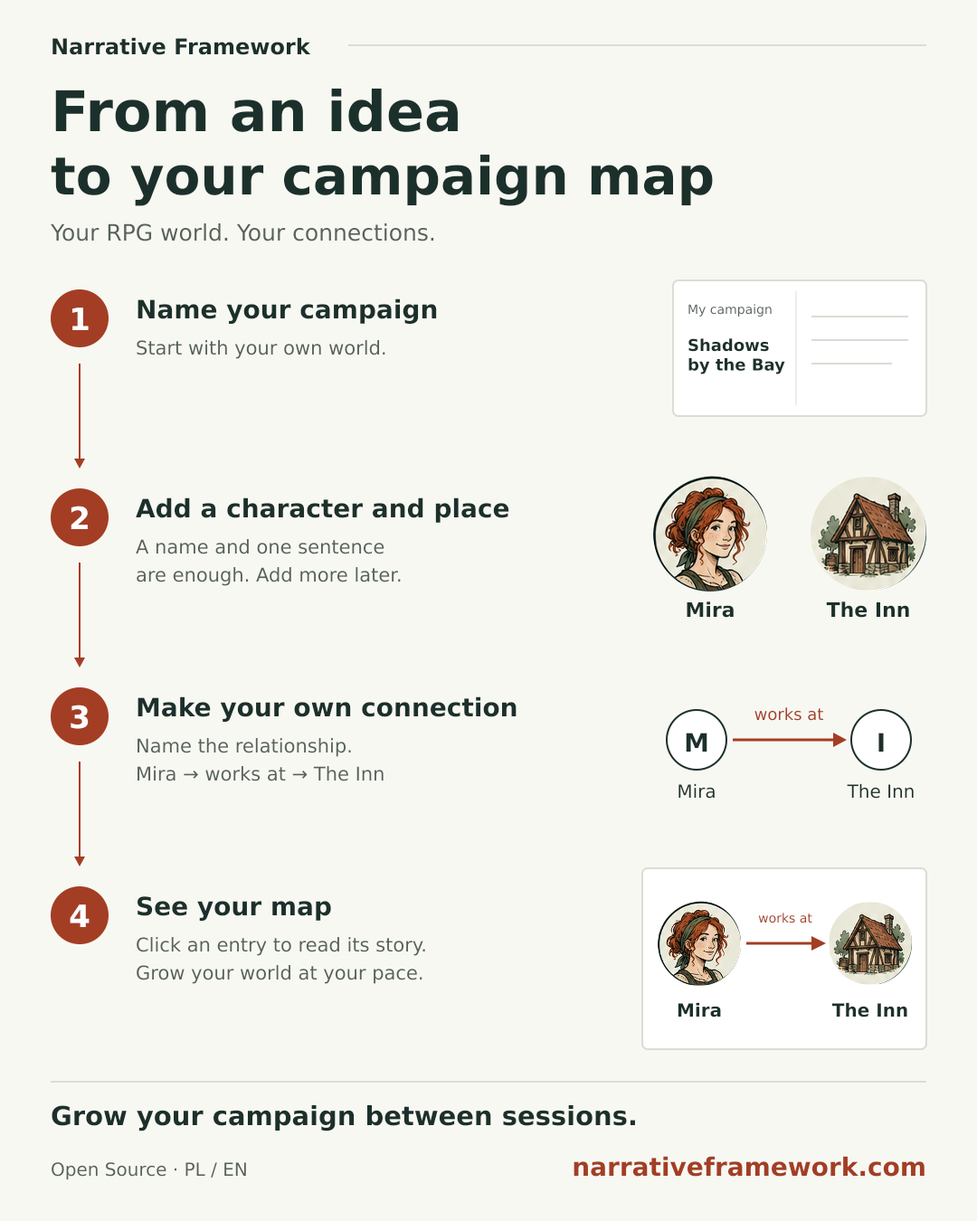
<style>
.page{position:relative;width:977px;height:1221px;background:#f8f8f3}
.page>*{position:absolute;margin:0}
.t1{font:21.7px "DejaVuSans-Bold";color:#1c302b}
.t2{font:56.1px "DejaVuSans-Bold";color:#1c302b}
.t3{font:52.5px "DejaVuSans-Bold";color:#1c302b}
.t4{font:22.6px "DejaVuSans-Regular";color:#56615a}
.t5{font:25.3px "DejaVuSans-Bold";color:#1c302b}
.t6{font:12.7px "DejaVuSans-Regular";color:#56615a}
.t7{font:30.7px "DejaVuSans-Bold";color:#ffffff}
.t8{font:19px "DejaVuSans-Regular";color:#56615a}
.t9{font:16.3px "DejaVuSans-Bold";color:#1c302b}
.t10{font:19.9px "DejaVuSans-Bold";color:#1c302b}
.t11{font:16.3px "DejaVuSans-Regular";color:#a33e24}
.t12{font:18.1px "DejaVuSans-Regular";color:#1c302b}
.t13{font:12.7px "DejaVuSans-Regular";color:#a33e24}
.t14{font:18.1px "DejaVuSans-Bold";color:#1c302b}
.t15{font:26.2px "DejaVuSans-Bold";color:#1c302b}
.t16{font:25.3px "DejaVuSans-Bold";color:#a33e24}
.t17{font:18.1px "DejaVuSans-Regular";color:#56615a}
</style>
<div class="page">
<p class="t1" style="left:52px;top:37px;width:260px;height:19px">Narrative Framework</p>
<p class="t2" style="left:54px;top:88px;width:405px;height:45px">From an idea</p>
<p class="t3" style="left:50px;top:154px;width:664px;height:53px">to your campaign map</p>
<p class="t4" style="left:49px;top:223px;width:386px;height:19px">Your RPG world. Your connections.</p>
<p class="t5" style="left:137px;top:298px;width:301px;height:28px">Name your campaign</p>
<p class="t6" style="left:687px;top:304px;width:85px;height:13px">My campaign</p>
<p class="t7" style="left:71px;top:307px;width:19px;height:24px">1</p>
<p class="t8" style="left:136px;top:340px;width:250px;height:20px">Start with your own world.</p>
<p class="t9" style="left:687px;top:338px;width:99px;height:37px">Shadows<br>by the Bay</p>
<p class="t5" style="left:135px;top:497px;width:375px;height:27px">Add a character and place</p>
<p class="t7" style="left:70px;top:506px;width:19px;height:24px">2</p>
<p class="t8" style="left:135px;top:539px;width:250px;height:16px">A name and one sentence</p>
<p class="t8" style="left:136px;top:567px;width:266px;height:20px">are enough. Add more later.</p>
<p class="t10" style="left:685px;top:601px;width:49px;height:18px">Mira</p>
<p class="t10" style="left:825px;top:601px;width:85px;height:18px">The Inn</p>
<p class="t5" style="left:137px;top:696px;width:380px;height:27px">Make your own connection</p>
<p class="t7" style="left:70px;top:704px;width:20px;height:26px">3</p>
<p class="t11" style="left:753px;top:707px;width:71px;height:15px">works at</p>
<p class="t8" style="left:137px;top:738px;width:215px;height:20px">Name the relationship.</p>
<p class="t5" style="left:685px;top:733px;width:23px;height:19px">M</p>
<p class="t5" style="left:878px;top:733px;width:6px;height:19px">I</p>
<p class="t8" style="left:137px;top:766px;width:247px;height:16px">Mira → works at → The Inn</p>
<p class="t12" style="left:677px;top:783px;width:38px;height:16px">Mira</p>
<p class="t12" style="left:846px;top:783px;width:68px;height:16px">The Inn</p>
<p class="t7" style="left:69px;top:904px;width:21px;height:23px">4</p>
<p class="t5" style="left:137px;top:896px;width:195px;height:26px">See your map</p>
<p class="t13" style="left:757px;top:912px;width:56px;height:12px">works at</p>
<p class="t8" style="left:136px;top:937px;width:290px;height:20px">Click an entry to read its story.</p>
<p class="t8" style="left:136px;top:965px;width:287px;height:20px">Grow your world at your pace.</p>
<p class="t14" style="left:676px;top:1002px;width:46px;height:16px">Mira</p>
<p class="t14" style="left:830px;top:1002px;width:78px;height:16px">The Inn</p>
<p class="t15" style="left:51px;top:1104px;width:585px;height:28px">Grow your campaign between sessions.</p>
<p class="t16" style="left:572px;top:1156px;width:353px;height:21px">narrativeframework.com</p>
<p class="t17" style="left:51px;top:1162px;width:196px;height:19px">Open Source · PL / EN</p>
</div>
